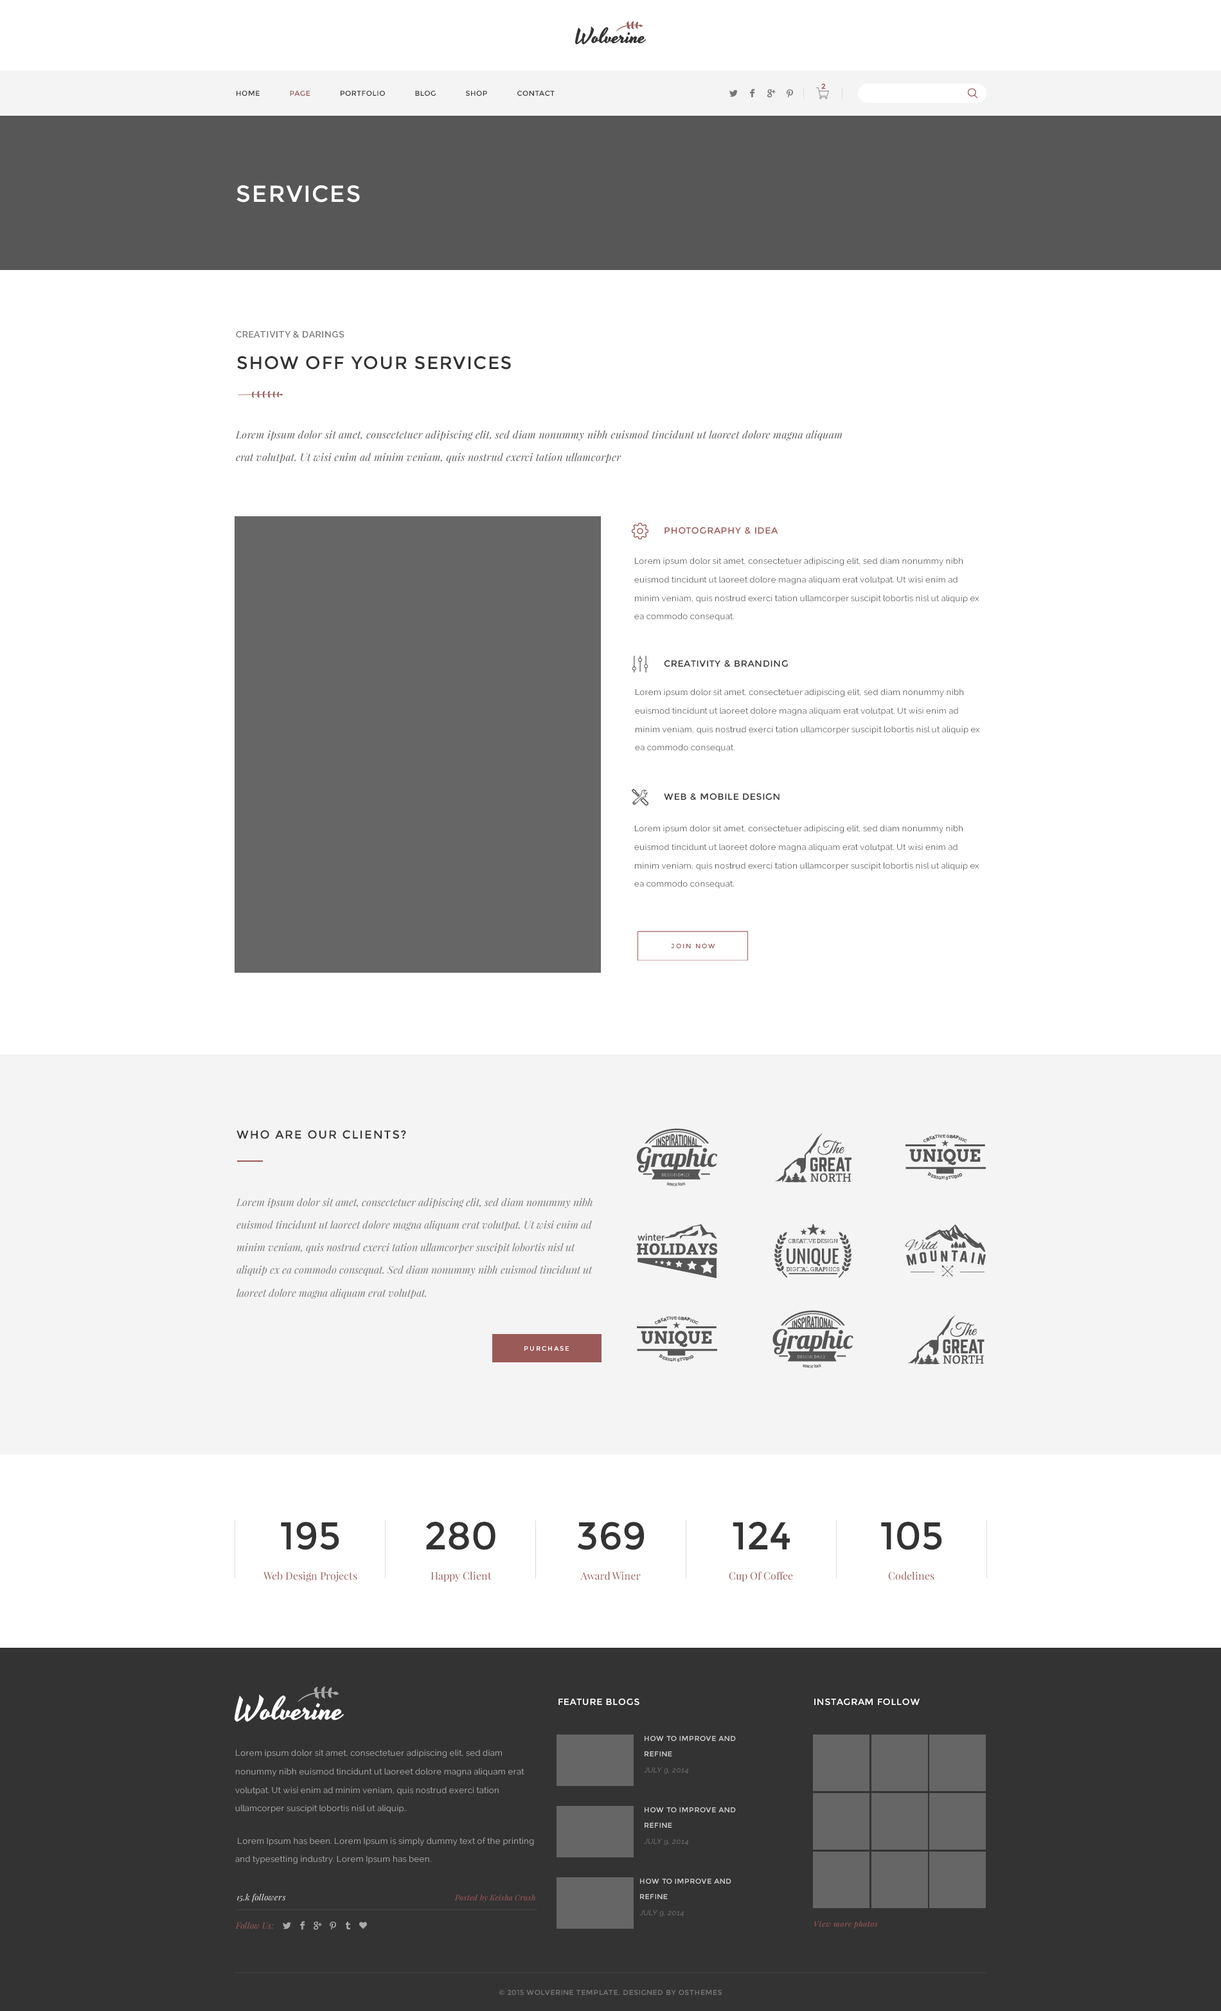
<style>
.page{position:relative;width:1221px;height:2011px;background:#ffffff}
.page>*{position:absolute;margin:0}
.t1{font:7.1px "Montserrat-Regular";color:#9a5a58;font-weight:bold}
.t2{font:7.1px "Montserrat-Regular";letter-spacing:0.05em;color:#333333}
.t3{font:7.1px "Montserrat-Regular";letter-spacing:0.05em;color:#9b5a57}
.t4{font:23.1px "Montserrat-Regular";letter-spacing:0.05em;color:#ffffff}
.t5{font:9px "Raleway-SemiBold";letter-spacing:0.05em;color:#777777}
.t6{font:18px "Montserrat-Regular";letter-spacing:0.05em;color:#333333}
.t7{font:10.3px/22.6px "PlayfairDisplay-Italic";letter-spacing:0.02em;color:#555555}
.t8{font:9px "Montserrat-Regular";letter-spacing:0.05em;color:#9c5b57}
.t9{font:8.4px/18.4px "Raleway-Regular";letter-spacing:0.02em;color:#555555}
.t10{font:9px "Montserrat-Regular";letter-spacing:0.05em;color:#333333}
.t11{font:6.4px "Montserrat-Regular";letter-spacing:0.2em;color:#995958}
.t12{font:11.6px "Montserrat-Regular";letter-spacing:0.1em;color:#333333}
.t13{font:10.3px/22.6px "PlayfairDisplay-Italic";color:#777777}
.t14{font:6.4px "Montserrat-Regular";letter-spacing:0.2em;color:#ffffff}
.t15{font:38.6px "Montserrat-Regular";color:#333333}
.t16{font:10.3px "PlayfairDisplay-Regular";color:#9a5a58}
.t17{font:9px "Montserrat-Regular";letter-spacing:0.05em;color:#ffffff}
.t18{font:7.1px/15.6px "Montserrat-Regular";letter-spacing:0.05em;color:#cccccc}
.t19{font:7.1px/15.6px "Raleway-Regular";letter-spacing:0.05em;color:#777777;font-style:italic}
.t20{font:8.4px/18.4px "Raleway-Regular";letter-spacing:0.02em;color:#aaaaaa}
.t21{font:8.4px "PlayfairDisplay-Italic";letter-spacing:0.02em;color:#dddddd}
.t22{font:7.7px "PlayfairDisplay-Italic";letter-spacing:0.02em;color:#9a5a58}
.t23{font:8.4px "PlayfairDisplay-Italic";letter-spacing:0.02em;color:#995958}
.t24{font:7.7px "PlayfairDisplay-Italic";letter-spacing:0.05em;color:#9a5a58}
.t25{font:7.1px "Montserrat-Regular";letter-spacing:0.05em;color:#777777}
</style>
<div class="page">
<p class="t1" style="left:822px;top:84px;width:4px;height:5px">2</p>
<p class="t2" style="left:237px;top:91px;width:318px;height:5px">HOME      <span class="t3">PAGE</span>      PORTFOLIO      BLOG      SHOP      CONTACT</p>
<p class="t4" style="left:237px;top:185px;width:123px;height:18px">SERVICES</p>
<p class="t5" style="left:236px;top:331px;width:109px;height:7px">CREATIVITY &amp; DARINGS</p>
<p class="t6" style="left:237px;top:356px;width:274px;height:14px">SHOW OFF YOUR SERVICES</p>
<p class="t7" style="left:235px;top:430px;width:608px;height:33px">Lorem ipsum dolor sit amet, consectetuer adipiscing elit, sed diam nonummy nibh euismod tincidunt ut laoreet dolore magna aliquam erat volutpat. Ut wisi enim ad minim veniam, quis nostrud exerci tation ullamcorper</p>
<p class="t8" style="left:665px;top:527px;width:114px;height:7px">PHOTOGRAPHY &amp; IDEA</p>
<p class="t9" style="left:634px;top:557px;width:346px;height:64px">Lorem ipsum dolor sit amet, consectetuer adipiscing elit, sed diam nonummy nibh euismod tincidunt ut laoreet dolore magna aliquam erat volutpat. Ut wisi enim ad minim veniam, quis nostrud exerci tation ullamcorper suscipit lobortis nisl ut aliquip ex ea commodo consequat.</p>
<p class="t10" style="left:664px;top:660px;width:124px;height:7px">CREATIVITY &amp; BRANDING</p>
<p class="t9" style="left:635px;top:688px;width:345px;height:64px">Lorem ipsum dolor sit amet, consectetuer adipiscing elit, sed diam nonummy nibh euismod tincidunt ut laoreet dolore magna aliquam erat volutpat. Ut wisi enim ad minim veniam, quis nostrud exerci tation ullamcorper suscipit lobortis nisl ut aliquip ex ea commodo consequat.</p>
<p class="t10" style="left:664px;top:793px;width:116px;height:7px">WEB &amp; MOBILE DESIGN</p>
<p class="t9" style="left:634px;top:825px;width:346px;height:63px">Lorem ipsum dolor sit amet, consectetuer adipiscing elit, sed diam nonummy nibh euismod tincidunt ut laoreet dolore magna aliquam erat volutpat. Ut wisi enim ad minim veniam, quis nostrud exerci tation ullamcorper suscipit lobortis nisl ut aliquip ex ea commodo consequat.</p>
<p class="t11" style="left:671px;top:943px;width:45px;height:5px">JOIN NOW</p>
<p class="t12" style="left:237px;top:1130px;width:169px;height:9px">WHO ARE OUR CLIENTS?</p>
<p class="t13" style="left:236px;top:1198px;width:357px;height:101px">Lorem ipsum dolor sit amet, consectetuer adipiscing elit, sed diam nonummy nibh euismod tincidunt ut laoreet dolore magna aliquam erat volutpat. Ut wisi enim ad minim veniam, quis nostrud exerci tation ullamcorper suscipit lobortis nisl ut aliquip ex ea commodo consequat. Sed diam nonummy nibh euismod tincidunt ut laoreet dolore magna aliquam erat volutpat.</p>
<p class="t14" style="left:525px;top:1346px;width:44px;height:5px">PURCHASE</p>
<p class="t15" style="left:281px;top:1522px;width:58px;height:28px">195</p>
<p class="t15" style="left:426px;top:1522px;width:70px;height:28px">280</p>
<p class="t15" style="left:577px;top:1522px;width:67px;height:28px">369</p>
<p class="t15" style="left:733px;top:1522px;width:57px;height:27px">124</p>
<p class="t15" style="left:881px;top:1522px;width:61px;height:28px">105</p>
<p class="t16" style="left:264px;top:1571px;width:93px;height:10px">Web Design Projects</p>
<p class="t16" style="left:431px;top:1571px;width:61px;height:10px">Happy Client</p>
<p class="t16" style="left:580px;top:1571px;width:61px;height:9px">Award Winer</p>
<p class="t16" style="left:729px;top:1571px;width:64px;height:10px">Cup Of Coffee</p>
<p class="t16" style="left:888px;top:1571px;width:47px;height:9px">Codelines</p>
<p class="t17" style="left:559px;top:1698px;width:81px;height:7px">FEATURE BLOGS</p>
<p class="t17" style="left:815px;top:1698px;width:105px;height:7px">INSTAGRAM FOLLOW</p>
<p class="t18" style="left:644px;top:1736px;width:92px;height:38px">HOW TO IMPROVE AND REFINE <br><span class="t19">JULY 9, 2014</span></p>
<p class="t20" style="left:235px;top:1749px;width:299px;height:115px">Lorem ipsum dolor sit amet, consectetuer adipiscing elit, sed diam nonummy nibh euismod tincidunt ut laoreet dolore magna aliquam erat volutpat. Ut wisi enim ad minim veniam, quis nostrud exerci tation ullamcorper suscipit lobortis nisl ut aliquip..<br> <br> Lorem Ipsum has been. Lorem Ipsum is simply dummy text of the printing and typesetting industry. Lorem Ipsum has been.</p>
<p class="t18" style="left:644px;top:1807px;width:92px;height:38px">HOW TO IMPROVE AND REFINE <br><span class="t19">JULY 9, 2014</span></p>
<p class="t18" style="left:640px;top:1878px;width:92px;height:38px">HOW TO IMPROVE AND REFINE <br><span class="t19">JULY 9, 2014</span></p>
<p class="t21" style="left:237px;top:1893px;width:49px;height:9px">15.k followers</p>
<p class="t22" style="left:455px;top:1894px;width:81px;height:8px">Posted by Keisha Crush</p>
<p class="t23" style="left:235px;top:1922px;width:39px;height:7px">Follow Us:</p>
<p class="t24" style="left:815px;top:1920px;width:63px;height:9px">View more photos</p>
<p class="t25" style="left:499px;top:1990px;width:224px;height:5px">© 2015 WOLVERINE TEMPLATE. DESIGNED BY OSTHEMES</p>
</div>
